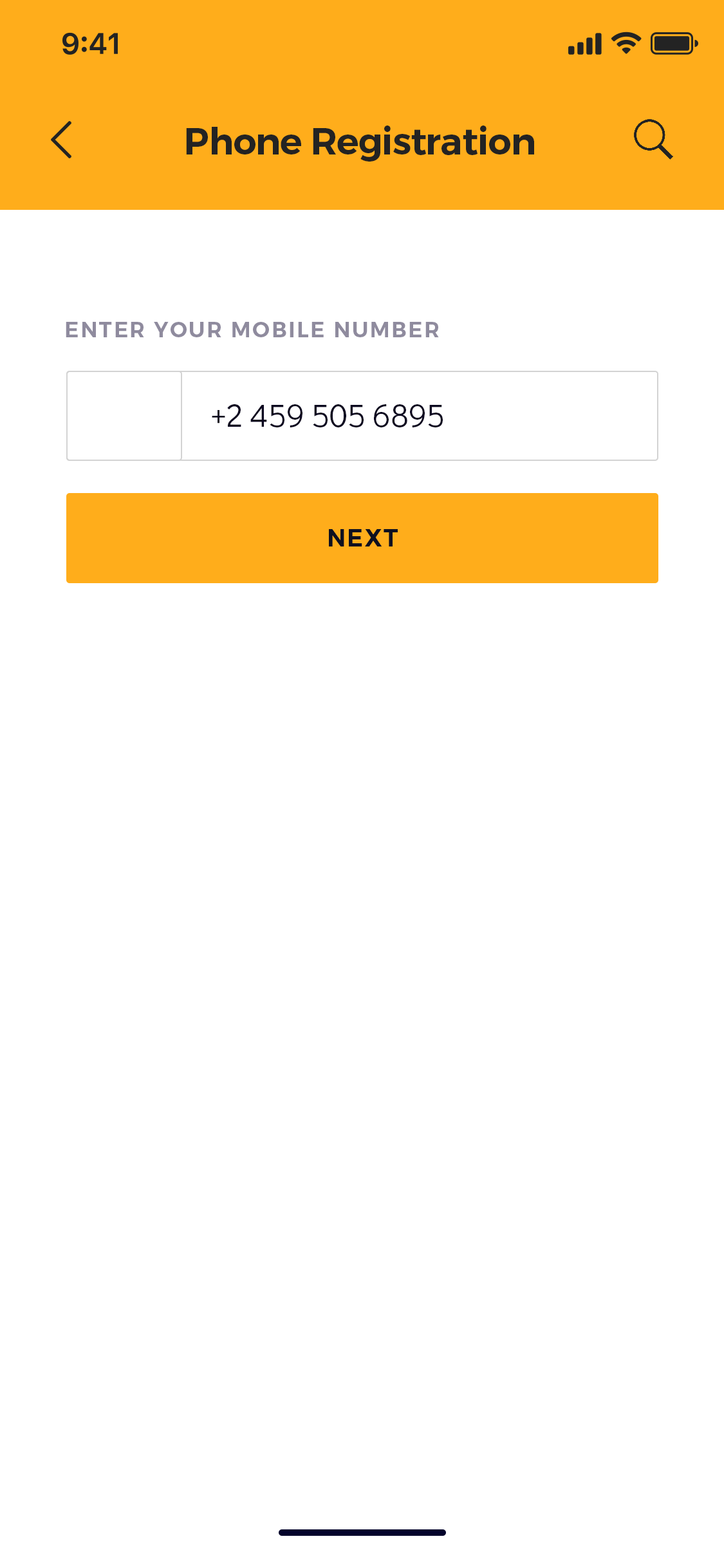
<style>
.page{position:relative;width:724px;height:1568px;background:#ffffff}
.page>*{position:absolute;margin:0}
.t1{font:37.5px "Montserrat-SemiBold";letter-spacing:-0.02em;color:#232323}
.t2{font:21.5px "Montserrat-SemiBold";letter-spacing:0.08em;color:#8f8b9e;text-transform:uppercase}
.t3{font:32.2px "DidactGothic-Regular";color:#0c0720}
.t4{font:24.1px "Montserrat-SemiBold";letter-spacing:0.06em;color:#0e1020;text-transform:uppercase}
</style>
<div class="page">
<p class="t1" style="left:186px;top:126px;width:348px;height:36px">Phone Registration</p>
<p class="t2" style="left:66px;top:322px;width:373px;height:15px">ENTER your mobile number</p>
<p class="t3" style="left:212px;top:404px;width:231px;height:23px">+2 459 505 6895</p>
<p class="t4" style="left:329px;top:529px;width:69px;height:17px">NEXT</p>
</div>
